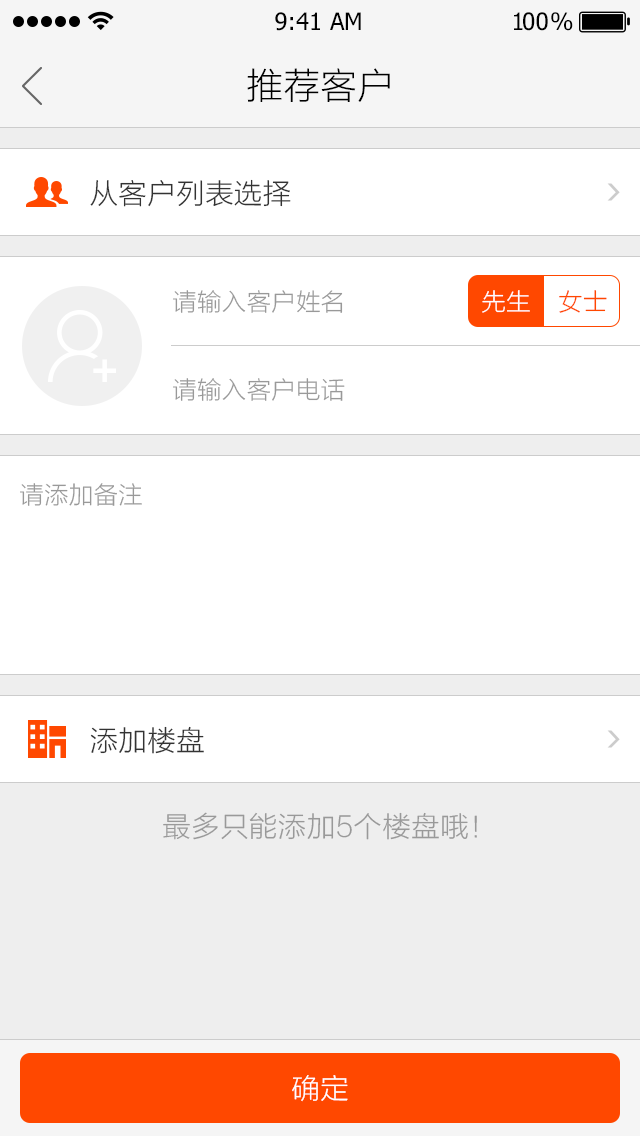
<style>
.page{position:relative;width:640px;height:1136px;background:#ffffff}
.page>*{position:absolute;margin:0}
.t1{font:24px "Tahoma";color:#000000}
.t2{font:24px "Tahoma";letter-spacing:-0.1em;color:#000000}
.t3{font:24px "Tahoma";letter-spacing:-0.25em;color:#000000}
.t4{font:36px "STHeitiSC-Light";color:#000000}
.t5{font:28px "STHeitiSC-Light";color:#333333}
.t6{font:24px "STHeitiSC-Light";color:#999999}
.t7{font:24px "STHeitiSC-Light";color:#ffffff}
.t8{font:24px "STHeitiSC-Light";color:#ff4800}
.t9{font:28px "STHeitiSC-Light";color:#999999}
.t10{font:28px "STHeitiSC-Light";color:#ffffff}
</style>
<div class="page">
<p class="t1" style="left:275px;top:12px;width:86px;height:19px">9:41 AM</p>
<p class="t2" style="left:514px;top:12px;width:59px;height:19px">1<span class="t1">0</span><span class="t3">0 </span>%</p>
<p class="t4" style="left:247px;top:68px;width:143px;height:34px">推荐客户</p>
<p class="t5" style="left:90px;top:179px;width:201px;height:28px">从客户列表选择</p>
<p class="t6" style="left:173px;top:290px;width:170px;height:23px">请输入客户姓名</p>
<p class="t7" style="left:482px;top:290px;width:48px;height:23px">先生</p>
<p class="t8" style="left:559px;top:290px;width:48px;height:23px">女士</p>
<p class="t6" style="left:173px;top:378px;width:172px;height:23px">请输入客户电话</p>
<p class="t6" style="left:20px;top:483px;width:122px;height:23px">请添加备注</p>
<p class="t5" style="left:90px;top:726px;width:114px;height:28px">添加楼盘</p>
<p class="t9" style="left:163px;top:812px;width:314px;height:28px">最多只能添加5个楼盘哦！</p>
<p class="t10" style="left:292px;top:1075px;width:56px;height:27px">确定</p>
</div>
